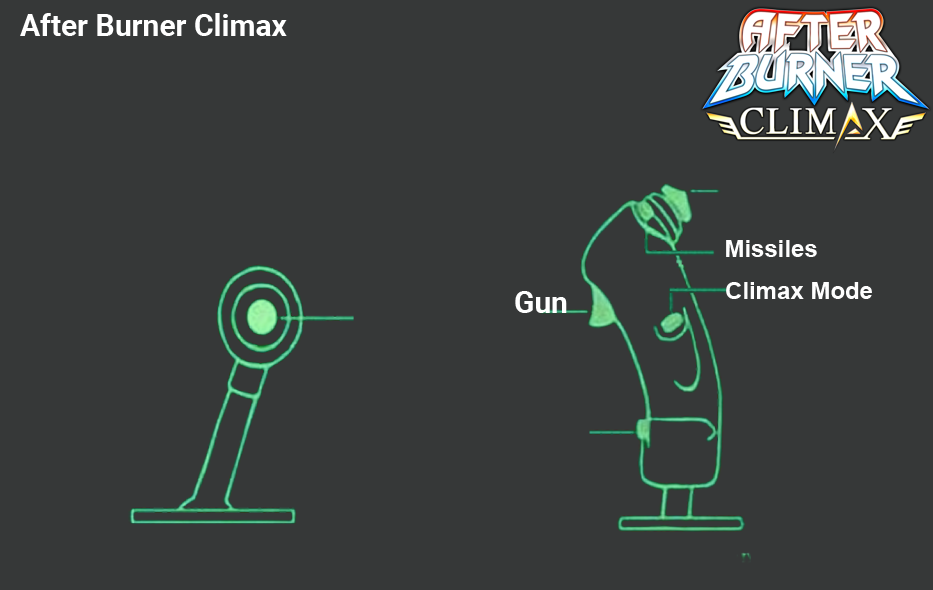
<style>
.page{position:relative;width:933px;height:590px;background:#363838}
.page>*{position:absolute;margin:0}
.t1{font:30px "Roboto-Bold";color:#ffffff}
.t2{font:24px "Arial-BoldMT";color:#fefefe}
</style>
<div class="page">
<p class="t1" style="left:20px;top:13px;width:267px;height:23px">After Burner Climax</p>
<p class="t2" style="left:726px;top:240px;width:91px;height:17px">Missiles</p>
<p class="t1" style="left:515px;top:291px;width:52px;height:22px">Gun</p>
<p class="t2" style="left:726px;top:282px;width:146px;height:17px">Climax Mode</p>
</div>
